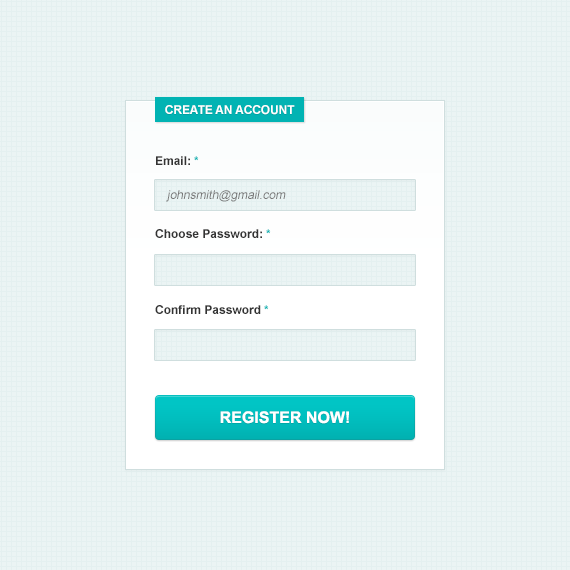
<style>
.page{position:relative;width:570px;height:570px;background:#ebf4f4}
.page>*{position:absolute;margin:0}
.t1{font:12px "Arial-BoldMT";letter-spacing:-0.01em;color:#ffffff}
.t2{font:12px/10px "Arial-BoldMT";color:#333333}
.t3{font:12px/10px "Arial-BoldMT";color:#01b3b3}
.t4{font:12px/13px "Arial-BoldMT";color:#333333}
.t5{font:12px/13px "Arial-BoldMT";color:#01b3b3}
.t6{font:12px "ArialMT";color:#777777;font-style:italic}
.t7{font:16px "Arial-BoldMT";color:#ffffff;text-transform:uppercase}
</style>
<div class="page">
<p class="t1" style="left:165px;top:105px;width:130px;height:10px">CREATE AN ACCOUNT</p>
<p class="t2" style="left:155px;top:156px;width:116px;height:158px">Email: <span class="t3">*<br></span><br><br><br><br>Choose Password: <span class="t3">*<br><br><br><br><br></span><span class="t4">Confirm Password </span><span class="t5">*</span></p>
<p class="t6" style="left:166px;top:190px;width:120px;height:12px">johnsmith@gmail.com</p>
<p class="t7" style="left:220px;top:411px;width:129px;height:13px">register now!</p>
</div>
